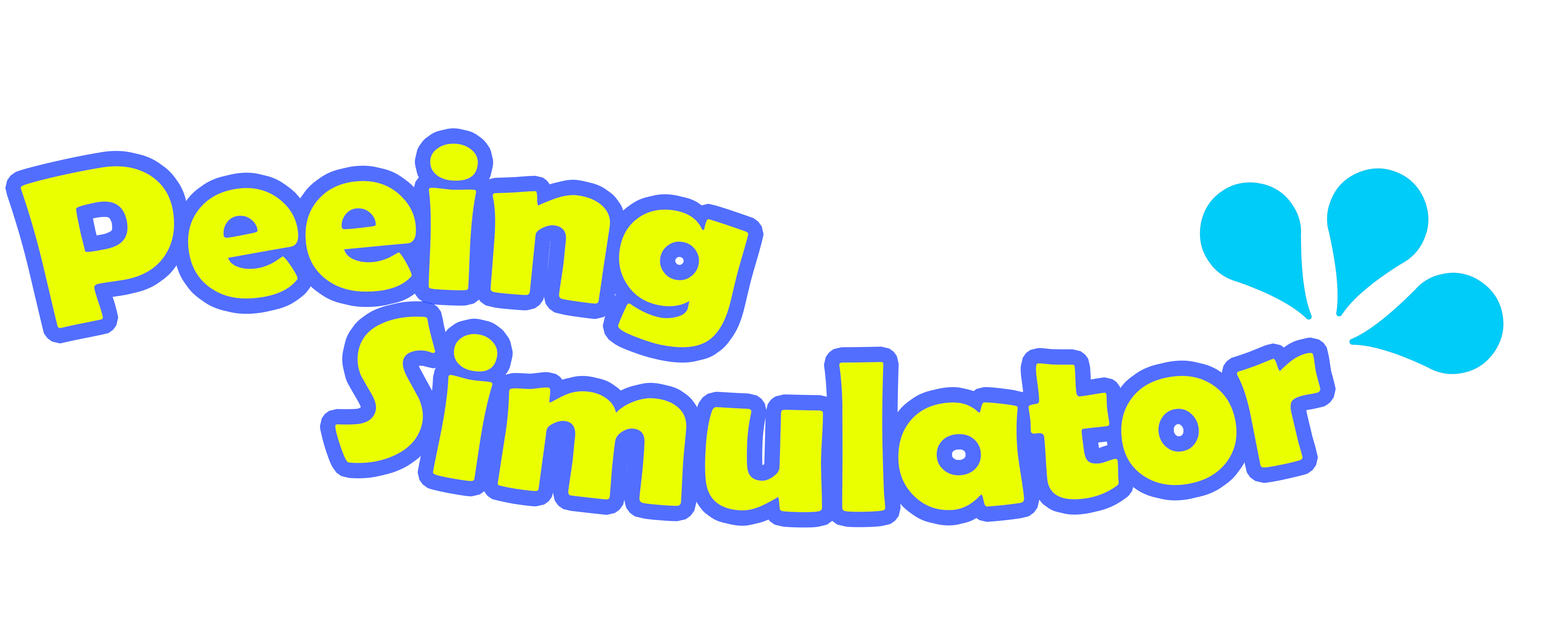
<style>
.page{position:relative;width:1568px;height:627px;background:#ffffff}
.page>*{position:absolute;margin:0}
.t1{font:216.8px "BerlinSansFBDemi-Bold";color:#eaff00}
</style>
<div class="page">
<p class="t1" style="left:21px;top:144px;width:727px;height:203px">Peeing</p>
<p class="t1" style="left:335px;top:317px;width:985px;height:195px">Simulator</p>
</div>
